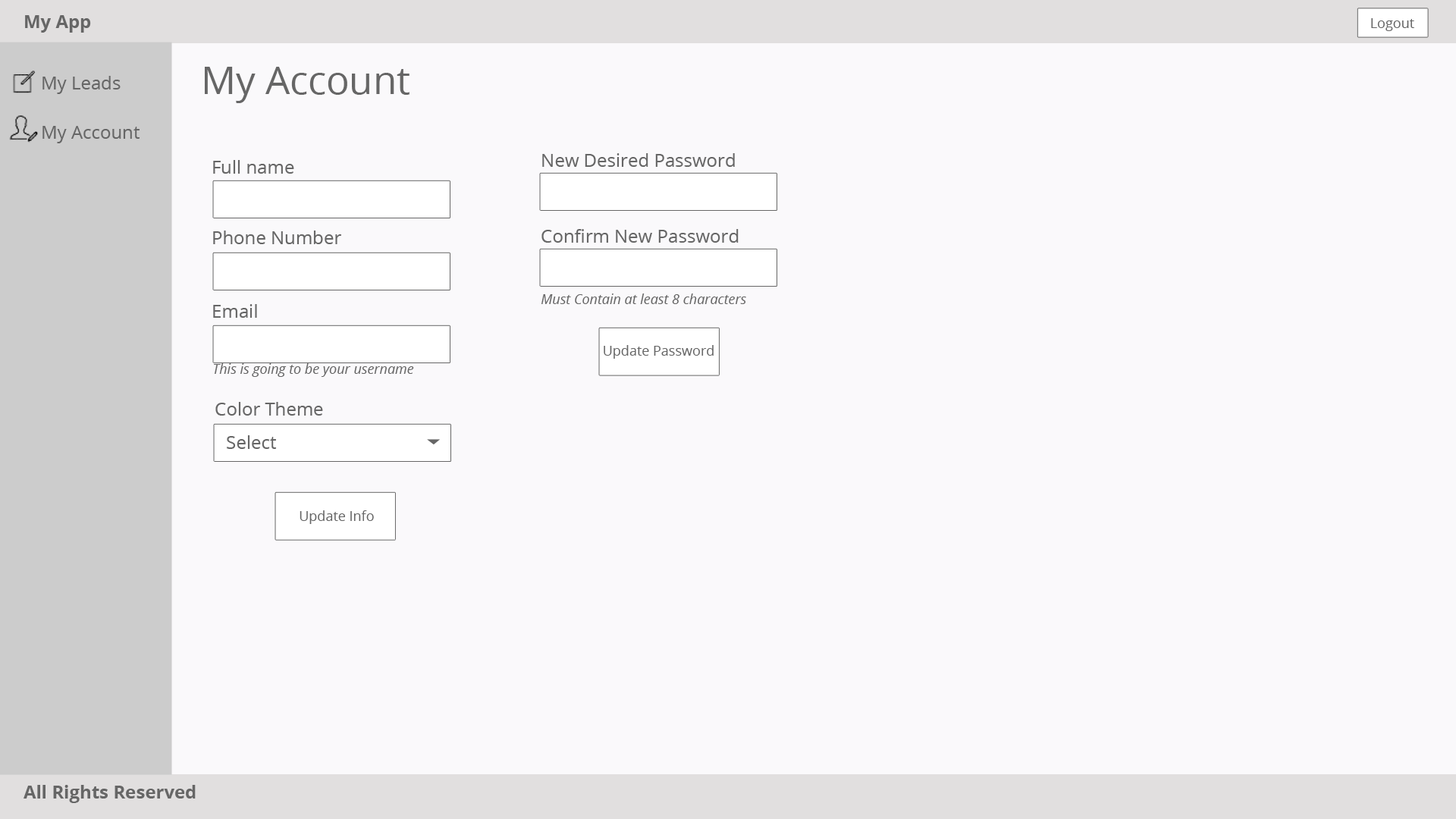
<style>
.page{position:relative;width:1456px;height:819px;background:#faf9fb}
.page>*{position:absolute;margin:0}
.t1{font:18.2px "OpenSans-Bold";color:#666666}
.t2{font:13.6px "OpenSans";color:#666666}
.t3{font:18.2px "OpenSans";color:#666666}
.t4{font:38.4px "OpenSans";color:#666666}
.t5{font:13.6px "OpenSans-Italic";color:#666666}
</style>
<div class="page">
<p class="t1" style="left:25px;top:15px;width:66px;height:18px">My App</p>
<p class="t2" style="left:1371px;top:18px;width:43px;height:13px">Logout</p>
<p class="t3" style="left:42px;top:76px;width:79px;height:18px">My Leads</p>
<p class="t4" style="left:205px;top:67px;width:204px;height:36px">My Account</p>
<p class="t3" style="left:42px;top:126px;width:98px;height:17px">My Account</p>
<p class="t3" style="left:213px;top:160px;width:81px;height:14px">Full name</p>
<p class="t3" style="left:542px;top:153px;width:193px;height:14px">New Desired Password</p>
<p class="t3" style="left:213px;top:231px;width:128px;height:13px">Phone Number</p>
<p class="t3" style="left:541px;top:229px;width:198px;height:14px">Confirm New Password</p>
<p class="t5" style="left:541px;top:293px;width:205px;height:11px">Must Contain at least 8 characters</p>
<p class="t3" style="left:213px;top:304px;width:44px;height:14px">Email</p>
<p class="t2" style="left:604px;top:345px;width:110px;height:14px">Update Password</p>
<p class="t5" style="left:214px;top:363px;width:200px;height:14px">This is going to be your username</p>
<p class="t3" style="left:215px;top:402px;width:108px;height:14px">Color Theme</p>
<p class="t3" style="left:227px;top:435px;width:50px;height:14px">Select</p>
<p class="t2" style="left:300px;top:510px;width:74px;height:14px">Update Info</p>
<p class="t1" style="left:24px;top:785px;width:172px;height:18px">All Rights Reserved</p>
</div>
